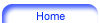
<style>
.page{position:relative;width:100px;height:23px;background:#ffffff}
.page>*{position:absolute;margin:0}
.t1{font:11px "ArialMT";color:#092ff6}
</style>
<div class="page">
<p class="t1" style="left:37px;top:12px;width:28px;height:8px">Home</p>
</div>
